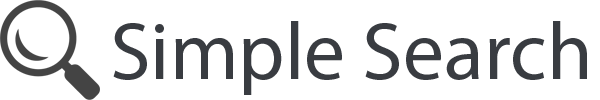
<style>
.page{position:relative;width:600px;height:100px;background:#ffffff}
.page>*{position:absolute;margin:0}
.t1{font:82px "MyriadPro-Regular";color:#393c41}
</style>
<div class="page">
<p class="t1" style="left:113px;top:21px;width:474px;height:74px">Simple Search</p>
</div>
